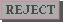
<style>
.page{position:relative;width:63px;height:22px;background:#acacac}
.page>*{position:absolute;margin:0}
.t1{font:14px "NuevaStd-Bold";color:#4b4b4b}
</style>
<div class="page">
<p class="t1" style="left:6px;top:5px;width:8px;height:9px">R</p>
<p class="t1" style="left:15px;top:5px;width:15px;height:9px">EJ</p>
<p class="t1" style="left:31px;top:5px;width:15px;height:9px">EC</p>
<p class="t1" style="left:47px;top:5px;width:8px;height:9px">T</p>
</div>
